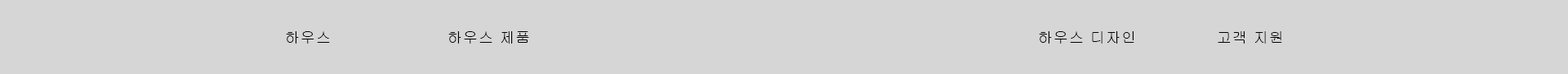
<style>
.page{position:relative;width:1568px;height:74px;background:#d6d6d6}
.page>*{position:absolute;margin:0}
.t1{font:14.7px "Gulim";letter-spacing:0.06em;color:#000000}
</style>
<div class="page">
<p class="t1" style="left:286px;top:31px;width:44px;height:12px">하우스</p>
<p class="t1" style="left:286px;top:31px;width:44px;height:12px">하우스</p>
<p class="t1" style="left:448px;top:31px;width:81px;height:12px">하우스 제품</p>
<p class="t1" style="left:448px;top:31px;width:81px;height:12px">하우스 제품</p>
<p class="t1" style="left:1039px;top:31px;width:95px;height:12px">하우스 디자인</p>
<p class="t1" style="left:1039px;top:31px;width:95px;height:12px">하우스 디자인</p>
<p class="t1" style="left:1218px;top:31px;width:64px;height:12px">고객 지원</p>
<p class="t1" style="left:1218px;top:31px;width:64px;height:12px">고객 지원</p>
</div>
